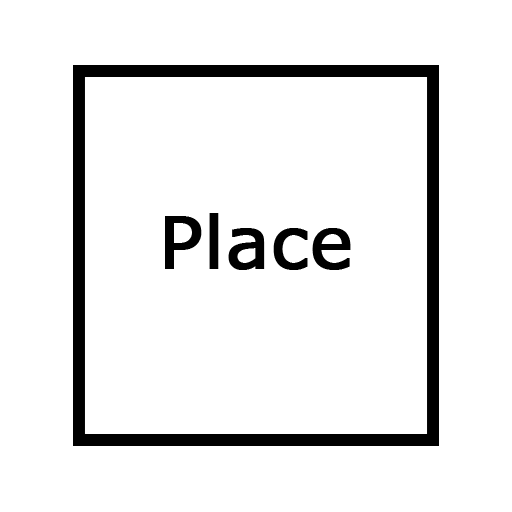
<style>
.page{position:relative;width:512px;height:512px;background:#ffffff}
.page>*{position:absolute;margin:0}
.t1{font:72px "Verdana";color:#000000;font-weight:bold}
</style>
<div class="page">
<p class="t1" style="left:165px;top:213px;width:186px;height:57px">Place</p>
</div>
